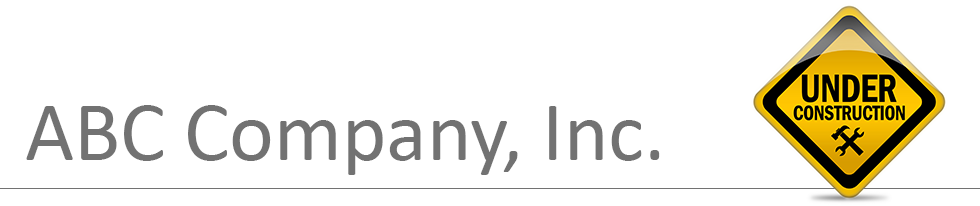
<style>
.page{position:relative;width:980px;height:206px;background:#ffffff}
.page>*{position:absolute;margin:0}
.t1{font:84.7px "Calibri";color:#727272}
</style>
<div class="page">
<p class="t1" style="left:26px;top:105px;width:634px;height:70px">ABC Company, Inc.</p>
</div>
